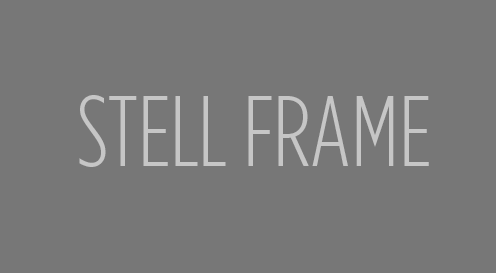
<style>
.page{position:relative;width:496px;height:273px;background:#777777}
.page>*{position:absolute;margin:0}
.t1{font:100px "GothamCond-Light";color:#c6c6c6}
</style>
<div class="page">
<p class="t1" style="left:79px;top:95px;width:350px;height:72px">STELL FRAME</p>
</div>
